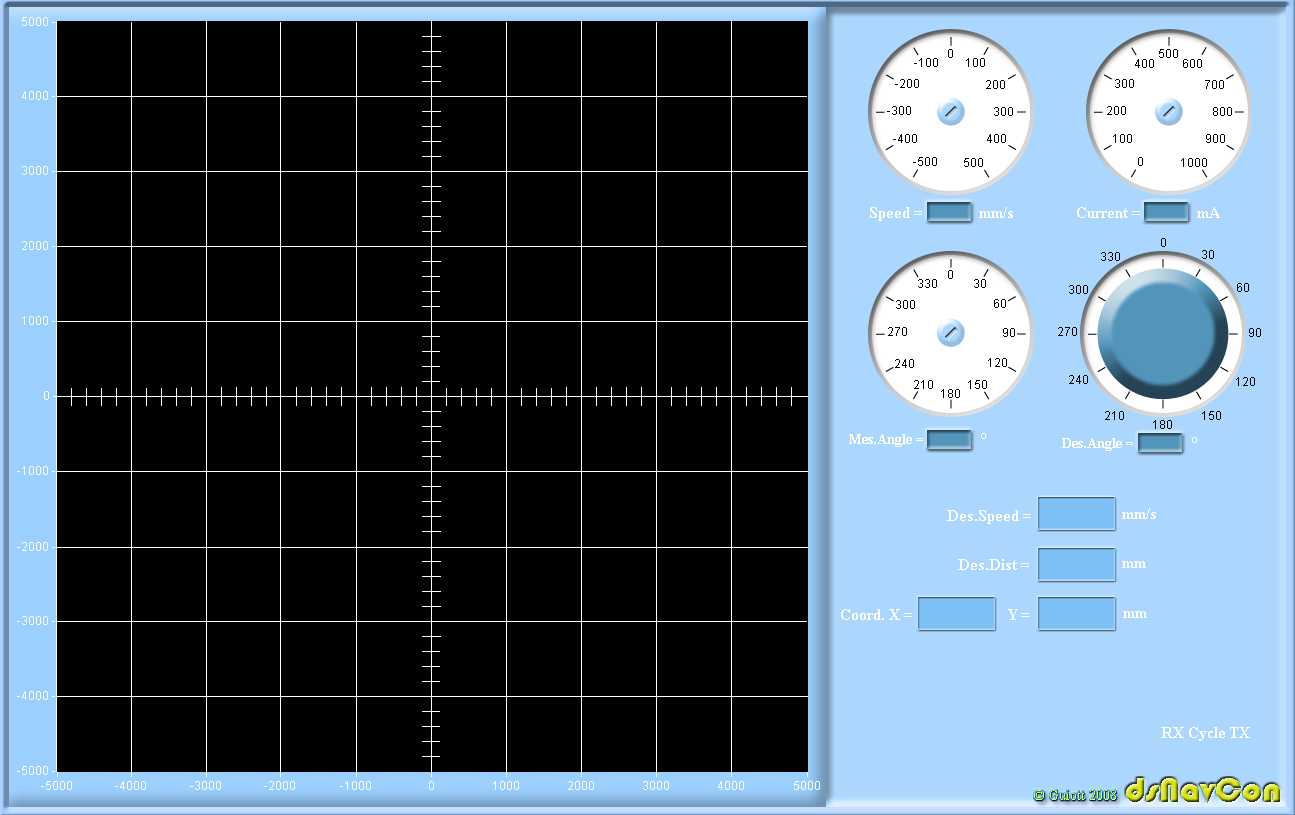
<style>
.page{position:relative;width:1295px;height:815px;background:#000000}
.page>*{position:absolute;margin:0}
.t1{font:12px "ArialMT";color:#ffffff}
.t2{font:12px "ArialMT";color:#000000}
.t3{font:16px "TimesNewRomanPS-BoldMT";color:#ffffff}
.t4{font:14px "TimesNewRomanPS-BoldMT";color:#ffffff}
.t5{font:36px "Bauhaus93"}
.t6{font:14px "TimesNewRomanPSMT"}
</style>
<div class="page">
<p class="t1" style="left:22px;top:17px;width:33px;height:9px">5000 -</p>
<p class="t2" style="left:948px;top:49px;width:5px;height:9px">0</p>
<p class="t2" style="left:1159px;top:49px;width:19px;height:9px">500</p>
<p class="t2" style="left:914px;top:58px;width:24px;height:9px">-100</p>
<p class="t2" style="left:966px;top:58px;width:19px;height:9px">100</p>
<p class="t2" style="left:1135px;top:59px;width:19px;height:9px">400</p>
<p class="t2" style="left:1183px;top:59px;width:19px;height:9px">600</p>
<p class="t2" style="left:895px;top:79px;width:24px;height:9px">-200</p>
<p class="t2" style="left:986px;top:80px;width:19px;height:9px">200</p>
<p class="t2" style="left:1115px;top:79px;width:19px;height:9px">300</p>
<p class="t2" style="left:1205px;top:80px;width:19px;height:9px">700</p>
<p class="t1" style="left:22px;top:91px;width:33px;height:9px">4000 -</p>
<p class="t2" style="left:887px;top:106px;width:24px;height:9px">-300</p>
<p class="t2" style="left:994px;top:107px;width:19px;height:9px">300</p>
<p class="t2" style="left:1107px;top:106px;width:19px;height:9px">200</p>
<p class="t2" style="left:1213px;top:107px;width:19px;height:9px">800</p>
<p class="t2" style="left:893px;top:134px;width:24px;height:9px">-400</p>
<p class="t2" style="left:987px;top:134px;width:19px;height:9px">400</p>
<p class="t2" style="left:1113px;top:134px;width:19px;height:9px">100</p>
<p class="t2" style="left:1206px;top:134px;width:19px;height:9px">900</p>
<p class="t2" style="left:913px;top:157px;width:24px;height:9px">-500</p>
<p class="t2" style="left:964px;top:158px;width:19px;height:9px">500</p>
<p class="t2" style="left:1138px;top:157px;width:5px;height:9px">0</p>
<p class="t2" style="left:1181px;top:158px;width:26px;height:9px">1000</p>
<p class="t1" style="left:22px;top:166px;width:33px;height:9px">3000 -</p>
<p class="t3" style="left:870px;top:207px;width:52px;height:14px">Speed =</p>
<p class="t3" style="left:979px;top:207px;width:34px;height:11px">mm/s</p>
<p class="t3" style="left:1077px;top:207px;width:63px;height:11px">Current =</p>
<p class="t3" style="left:1197px;top:207px;width:23px;height:11px">mA</p>
<p class="t1" style="left:22px;top:241px;width:33px;height:9px">2000 -</p>
<p class="t2" style="left:1161px;top:238px;width:5px;height:9px">0</p>
<p class="t2" style="left:1101px;top:252px;width:19px;height:9px">330</p>
<p class="t2" style="left:1202px;top:250px;width:12px;height:9px">30</p>
<p class="t2" style="left:948px;top:270px;width:5px;height:9px">0</p>
<p class="t2" style="left:918px;top:279px;width:19px;height:9px">330</p>
<p class="t2" style="left:974px;top:279px;width:12px;height:9px">30</p>
<p class="t2" style="left:1069px;top:285px;width:19px;height:9px">300</p>
<p class="t2" style="left:1237px;top:283px;width:12px;height:9px">60</p>
<p class="t2" style="left:896px;top:300px;width:19px;height:9px">300</p>
<p class="t2" style="left:994px;top:299px;width:12px;height:9px">60</p>
<p class="t1" style="left:22px;top:316px;width:33px;height:9px">1000 -</p>
<p class="t2" style="left:888px;top:327px;width:19px;height:9px">270</p>
<p class="t2" style="left:1003px;top:328px;width:12px;height:9px">90</p>
<p class="t2" style="left:1058px;top:327px;width:19px;height:9px">270</p>
<p class="t2" style="left:1249px;top:328px;width:12px;height:9px">90</p>
<p class="t2" style="left:895px;top:359px;width:19px;height:9px">240</p>
<p class="t2" style="left:988px;top:358px;width:19px;height:9px">120</p>
<p class="t2" style="left:1069px;top:375px;width:19px;height:9px">240</p>
<p class="t2" style="left:1236px;top:377px;width:19px;height:9px">120</p>
<p class="t2" style="left:914px;top:380px;width:19px;height:9px">210</p>
<p class="t2" style="left:941px;top:389px;width:19px;height:9px">180</p>
<p class="t2" style="left:968px;top:380px;width:19px;height:9px">150</p>
<p class="t1" style="left:44px;top:391px;width:12px;height:9px">0 -</p>
<p class="t2" style="left:1105px;top:411px;width:19px;height:9px">210</p>
<p class="t2" style="left:1202px;top:411px;width:19px;height:9px">150</p>
<p class="t2" style="left:1153px;top:420px;width:19px;height:9px">180</p>
<p class="t4" style="left:849px;top:434px;width:74px;height:13px">Mes.Angle =</p>
<p class="t3" style="left:981px;top:433px;width:5px;height:6px">°</p>
<p class="t4" style="left:1062px;top:438px;width:71px;height:13px">Des.Angle =</p>
<p class="t3" style="left:1192px;top:437px;width:5px;height:6px">°</p>
<p class="t1" style="left:17px;top:466px;width:38px;height:9px">-1000 -</p>
<p class="t3" style="left:947px;top:510px;width:84px;height:14px">Des.Speed =</p>
<p class="t3" style="left:1122px;top:508px;width:34px;height:11px">mm/s</p>
<p class="t1" style="left:17px;top:542px;width:38px;height:9px">-2000 -</p>
<p class="t3" style="left:958px;top:559px;width:71px;height:11px">Des.Dist =</p>
<p class="t3" style="left:1122px;top:561px;width:24px;height:7px">mm</p>
<p class="t1" style="left:17px;top:616px;width:38px;height:9px">-3000 -</p>
<p class="t3" style="left:841px;top:609px;width:71px;height:11px">Coord. X =</p>
<p class="t3" style="left:1008px;top:609px;width:21px;height:11px">Y =</p>
<p class="t3" style="left:1123px;top:611px;width:24px;height:7px">mm</p>
<p class="t1" style="left:17px;top:691px;width:38px;height:9px">-4000 -</p>
<p class="t3" style="left:1161px;top:727px;width:23px;height:11px">RX</p>
<p class="t3" style="left:1189px;top:727px;width:36px;height:14px">Cycle</p>
<p class="t3" style="left:1230px;top:727px;width:20px;height:11px">TX</p>
<p class="t1" style="left:17px;top:766px;width:38px;height:9px">-5000 -</p>
<p class="t1" style="left:41px;top:766px;width:31px;height:24px;text-align:center">|<br>-5000</p>
<p class="t1" style="left:115px;top:766px;width:31px;height:24px;text-align:center">|<br>-4000</p>
<p class="t1" style="left:190px;top:766px;width:31px;height:24px;text-align:center">|<br>-3000</p>
<p class="t1" style="left:264px;top:766px;width:31px;height:24px;text-align:center">|<br>-2000</p>
<p class="t1" style="left:340px;top:766px;width:31px;height:24px;text-align:center">|<br>-1000</p>
<p class="t1" style="left:429px;top:766px;width:5px;height:24px;text-align:center">|<br>0</p>
<p class="t1" style="left:493px;top:766px;width:26px;height:24px;text-align:center">|<br>1000</p>
<p class="t1" style="left:568px;top:766px;width:26px;height:24px;text-align:center">|<br>2000</p>
<p class="t1" style="left:643px;top:766px;width:26px;height:24px;text-align:center">|<br>3000</p>
<p class="t1" style="left:718px;top:766px;width:26px;height:24px;text-align:center">|<br>4000</p>
<p class="t1" style="left:794px;top:766px;width:26px;height:24px;text-align:center">|<br>5000</p>
<p class="t5" style="left:1126px;top:778px;width:154px;height:25px">dsNavCon</p>
<p class="t6" style="left:1034px;top:790px;width:82px;height:10px">© Guiott 2008</p>
</div>
